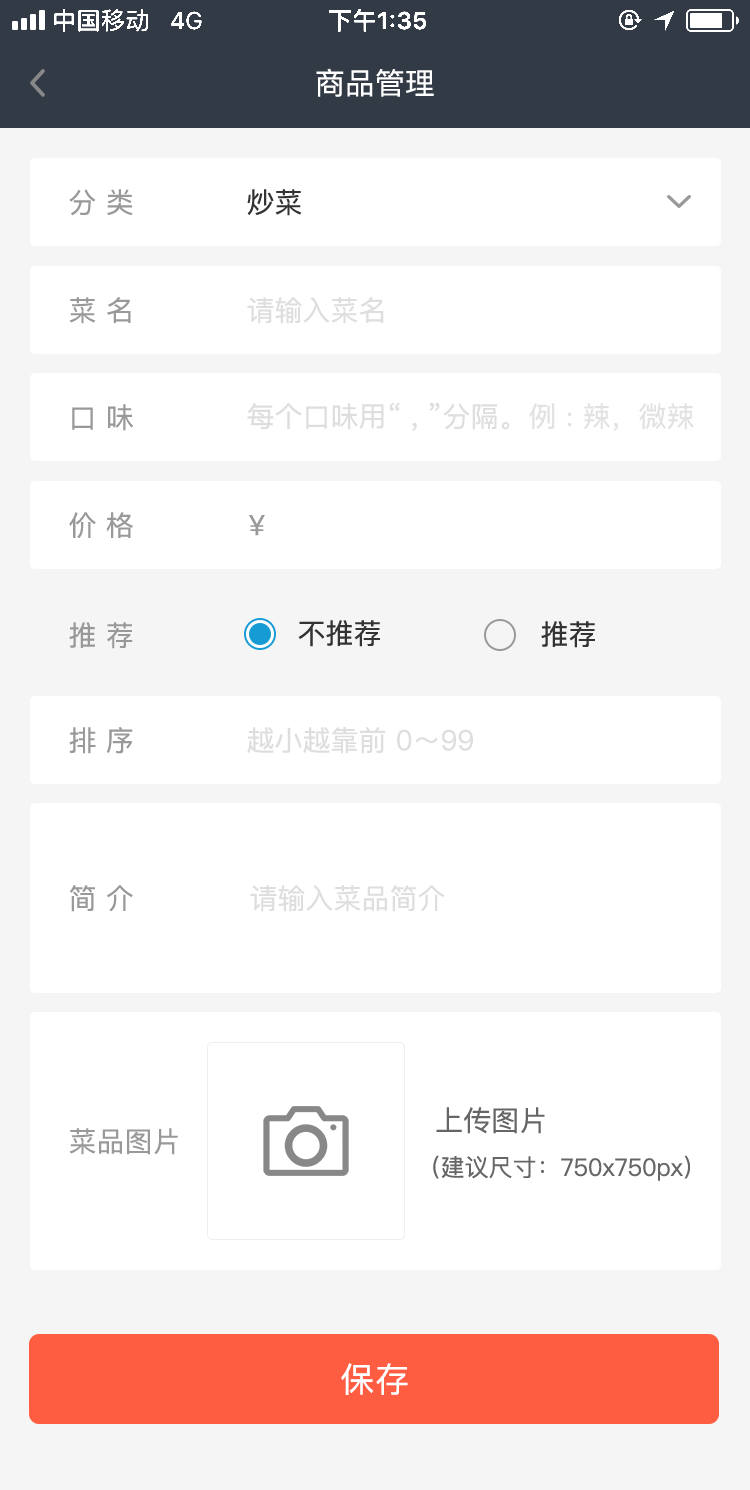
<style>
.page{position:relative;width:750px;height:1490px;background:#ffffff}
.page>*{position:absolute;margin:0}
.t1{font:30px "PingFangSC-Regular";color:#ffffff}
.t2{font:28px "PingFangSC-Regular";color:#999999}
.t3{font:28px "PingFangSC-Regular";color:#333333}
.t4{font:28px "PingFangSC-Regular";color:#dedede}
.t5{font:28px "PingFangSC-Regular";color:#e2e2e2}
.t6{font:24px "PingFangSC-Regular";color:#666666}
.t7{font:28px "PingFangSC-Regular";color:#666666}
.t8{font:34px "PingFang-SC-Medium";letter-spacing:0.02em;color:#ffffff}
</style>
<div class="page">
<p class="t1" style="left:316px;top:68px;width:118px;height:29px">商品管理</p>
<p class="t2" style="left:69px;top:189px;width:64px;height:27px">分 类</p>
<p class="t3" style="left:247px;top:189px;width:55px;height:27px">炒菜</p>
<p class="t2" style="left:69px;top:297px;width:62px;height:27px">菜 名</p>
<p class="t4" style="left:247px;top:297px;width:137px;height:27px">请输入菜名</p>
<p class="t2" style="left:72px;top:404px;width:61px;height:27px">口 味</p>
<p class="t4" style="left:247px;top:402px;width:263px;height:29px">每个口味用“ , ”分隔。</p>
<p class="t5" style="left:529px;top:403px;width:165px;height:28px">例 : 辣，微辣</p>
<p class="t2" style="left:69px;top:512px;width:64px;height:27px">价 格</p>
<p class="t2" style="left:249px;top:515px;width:16px;height:21px">¥</p>
<p class="t2" style="left:69px;top:622px;width:64px;height:27px">推 荐</p>
<p class="t3" style="left:298px;top:620px;width:82px;height:27px">不推荐</p>
<p class="t3" style="left:541px;top:621px;width:54px;height:27px">推荐</p>
<p class="t2" style="left:69px;top:727px;width:64px;height:27px">排 序</p>
<p class="t4" style="left:247px;top:727px;width:226px;height:27px">越小越靠前 0～99</p>
<p class="t2" style="left:69px;top:885px;width:64px;height:27px">简 介</p>
<p class="t4" style="left:250px;top:885px;width:195px;height:27px">请输入菜品简介</p>
<p class="t6" style="left:433px;top:1107px;width:257px;height:74px"><span class="t7">  上传图片<br></span>（建议尺寸：750x750px）</p>
<p class="t2" style="left:69px;top:1128px;width:109px;height:27px">菜品图片</p>
<p class="t8" style="left:341px;top:1363px;width:67px;height:32px">保存</p>
</div>
